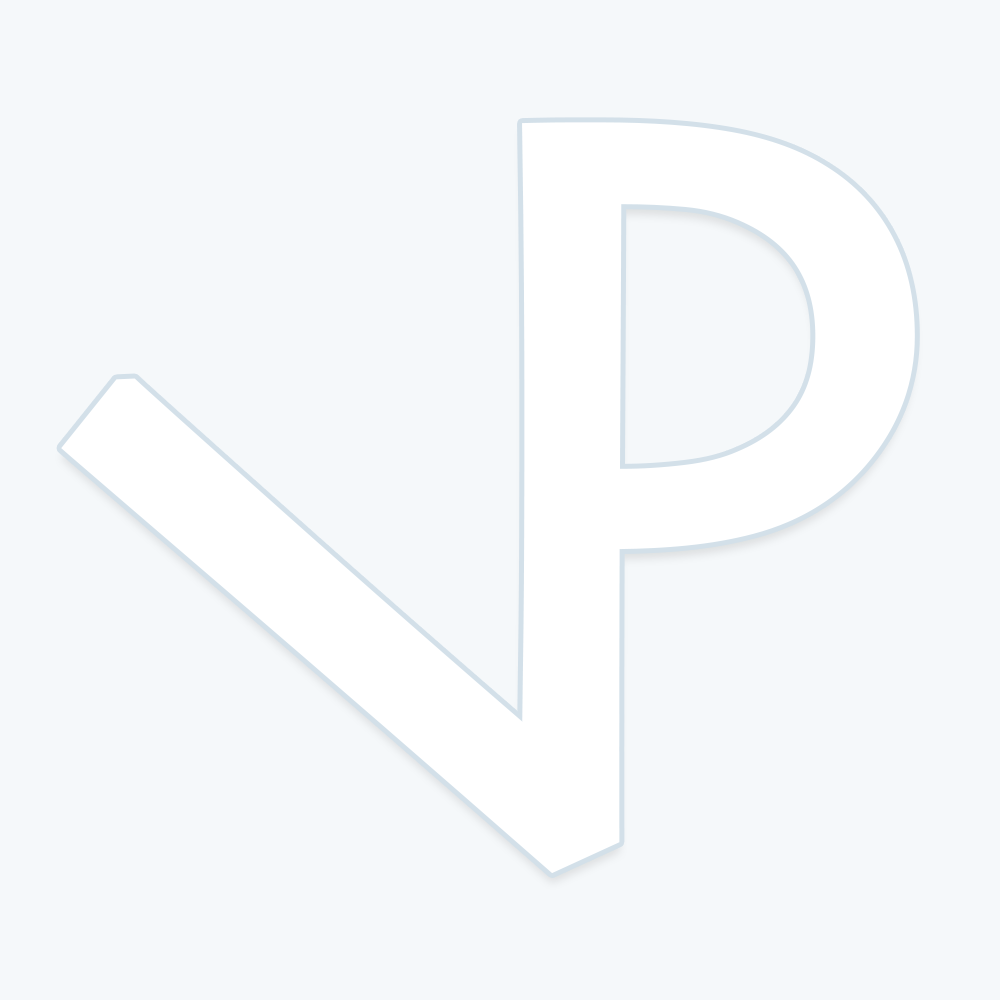
<style>
.page{position:relative;width:1000px;height:1000px;background:#f5f8fa}
.page>*{position:absolute;margin:0}
.t1{font:900px "Skia-Regular";color:#ffffff;font-weight:bold}
</style>
<div class="page">
<p class="t1" style="left:522px;top:122px;width:393px;height:614px">P</p>
<p class="t1" style="left:61px;top:183px;width:561px;height:691px;rotate:-25deg">V</p>
</div>
